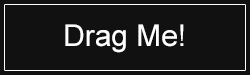
<style>
.page{position:relative;width:250px;height:75px;background:#111111}
.page>*{position:absolute;margin:0}
.t1{font:30px "ArialMT";color:#ffffff}
</style>
<div class="page">
<p class="t1" style="left:65px;top:24px;width:119px;height:29px">Drag Me!</p>
</div>
